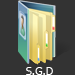
<style>
.page{position:relative;width:75px;height:75px;background:#333333}
.page>*{position:absolute;margin:0}
.t1{font:11px "Tahoma";color:#ffffff}
</style>
<div class="page">
<p class="t1" style="left:26px;top:67px;width:27px;height:8px">S.G.D</p>
</div>
